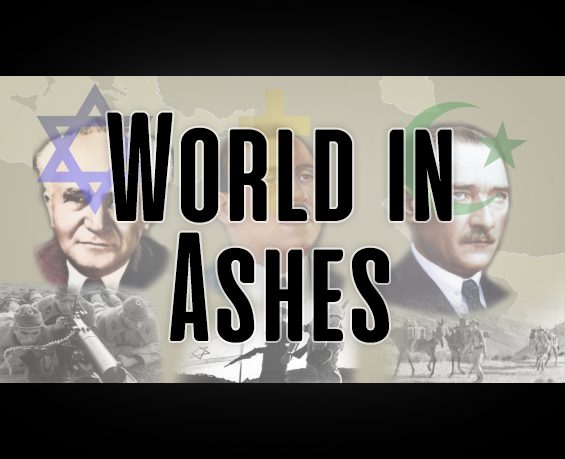
<style>
.page{position:relative;width:565px;height:459px}
.page>*{position:absolute;margin:0}
.t1{font:155px/120px "Cinematografica-Bold";letter-spacing:0.025em;color:#000000}
</style>
<div class="page">
<p class="t1" style="left:107px;top:112px;width:345px;height:231px;text-align:center">World in<br>Ashes</p>
</div>
